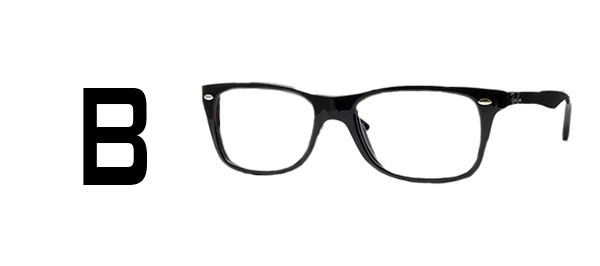
<style>
.page{position:relative;width:600px;height:266px;background:#ffffff}
.page>*{position:absolute;margin:0}
.t1{font:230px "BankGothicBT-Medium";color:#000000;scale:0.57 1}
</style>
<div class="page">
<p class="t1" style="left:83px;top:88px;width:64px;height:97px">b</p>
</div>
